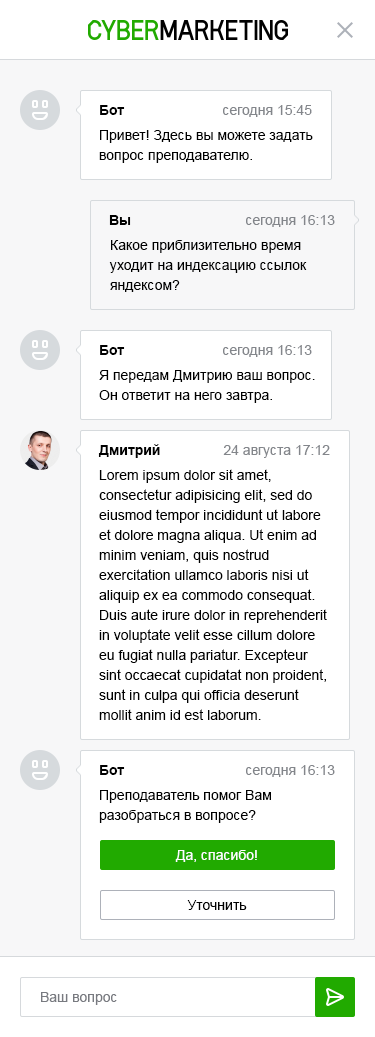
<style>
.page{position:relative;width:375px;height:1037px;background:#ffffff}
.page>*{position:absolute;margin:0}
.t1{font:14px "Arial-BoldMT";color:#000000}
.t2{font:14px "ArialMT";color:#83868b}
.t3{font:14px/20px "ArialMT";color:#000000}
.t4{font:14px "ArialMT";color:#ffffff}
.t5{font:14px "ArialMT";color:#000000}
.t6{font:14px "ArialMT";color:#787a80}
</style>
<div class="page">
<p class="t1" style="left:100px;top:105px;width:25px;height:10px">Бот</p>
<p class="t2" style="left:223px;top:105px;width:89px;height:12px">сегодня 15:45</p>
<p class="t3" style="left:99px;top:130px;width:214px;height:33px">Привет! Здесь вы можете задать <br>вопрос преподавателю.</p>
<p class="t1" style="left:109px;top:215px;width:22px;height:10px">Вы</p>
<p class="t2" style="left:246px;top:215px;width:89px;height:12px">сегодня 16:13</p>
<p class="t3" style="left:109px;top:240px;width:198px;height:52px">Какое приблизительно время <br>уходит на индексацию ссылок <br>яндексом?</p>
<p class="t1" style="left:100px;top:345px;width:25px;height:10px">Бот</p>
<p class="t2" style="left:223px;top:345px;width:89px;height:12px">сегодня 16:13</p>
<p class="t3" style="left:99px;top:370px;width:216px;height:33px">Я передам Дмитрию ваш вопрос.<br>Он ответит на него завтра.</p>
<p class="t1" style="left:98px;top:444px;width:62px;height:14px">Дмитрий</p>
<p class="t2" style="left:223px;top:445px;width:107px;height:13px">24 августа 17:12</p>
<p class="t3" style="left:99px;top:469px;width:228px;height:251px">Lorem ipsum dolor sit amet, <br>consectetur adipisicing elit, sed do <br>eiusmod tempor incididunt ut labore <br>et dolore magna aliqua. Ut enim ad <br>minim veniam, quis nostrud <br>exercitation ullamco laboris nisi ut <br>aliquip ex ea commodo consequat. <br>Duis aute irure dolor in reprehenderit <br>in voluptate velit esse cillum dolore <br>eu fugiat nulla pariatur. Excepteur <br>sint occaecat cupidatat non proident, <br>sunt in culpa qui officia deserunt <br>mollit anim id est laborum.</p>
<p class="t1" style="left:100px;top:765px;width:25px;height:10px">Бот</p>
<p class="t2" style="left:246px;top:765px;width:89px;height:12px">сегодня 16:13</p>
<p class="t3" style="left:99px;top:790px;width:172px;height:33px">Преподаватель помог Вам<br>разобраться в вопросе?</p>
<p class="t4" style="left:175px;top:850px;width:82px;height:12px">Да, спасибо!</p>
<p class="t5" style="left:187px;top:900px;width:60px;height:10px">Уточнить</p>
<p class="t6" style="left:41px;top:992px;width:76px;height:13px">Ваш вопрос</p>
</div>
